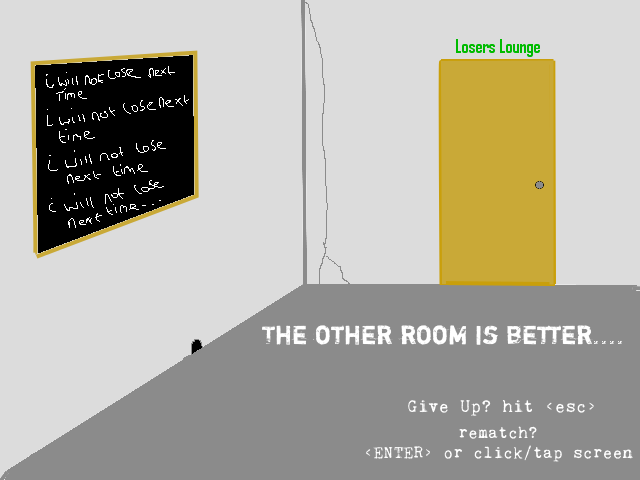
<style>
.page{position:relative;width:640px;height:480px;background:#dcdcdc}
.page>*{position:absolute;margin:0}
.t1{font:18px "AgencyFB-BoldCondensed";color:#00bb00}
.t2{font:109px "Shortcut";color:#ffffff}
.t3{font:18px "KingthingsTrypewriter2";color:#ffffff}
.t4{font:17px "KingthingsTrypewriter2";color:#ffffff}
</style>
<div class="page">
<p class="t1" style="left:456px;top:35px;width:85px;height:22px">Losers Lounge</p>
<p class="t2" style="left:262px;top:318px;width:362px;height:33px">The other room is better....</p>
<p class="t3" style="left:408px;top:399px;width:186px;height:18px">Give Up? hit &lt;esc&gt;</p>
<p class="t4" style="left:366px;top:426px;width:267px;height:37px;text-align:center">rematch? <br>&lt;ENTER&gt; or click/tap screen</p>
</div>
